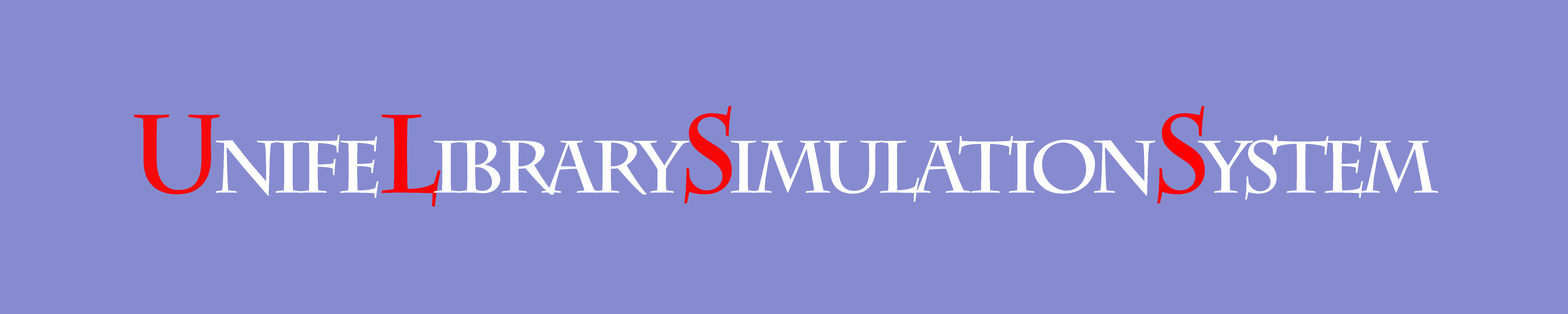
<style>
.page{position:relative;width:1568px;height:314px;background:#868bd0}
.page>*{position:absolute;margin:0}
.t1{font:73.6px "CharlemagneStd-Bold";letter-spacing:-0.1em;color:#ffffff}
.t2{font:29.4px "CharlemagneStd-Bold";color:#ffffff}
.t3{font:110.4px "CharlemagneStd-Bold";letter-spacing:-0.1em;color:#f50909}
.t4{font:110.4px "CharlemagneStd-Bold";letter-spacing:-0.1em;color:#fa0000}
.t5{font:110.4px "CharlemagneStd-Bold";letter-spacing:-0.1em;color:#f80707}
.t6{font:110.4px "CharlemagneStd-Bold";letter-spacing:-0.1em;color:#ff0000}
</style>
<div class="page">
<p class="t1" style="left:134px;top:106px;width:1304px;height:100px"><span class="t2"><br><br></span><span class="t3">U</span>NIFE<span class="t4">L</span>IBRARY<span class="t5">S</span>IMULATION<span class="t6">S</span>YSTEM</p>
</div>
